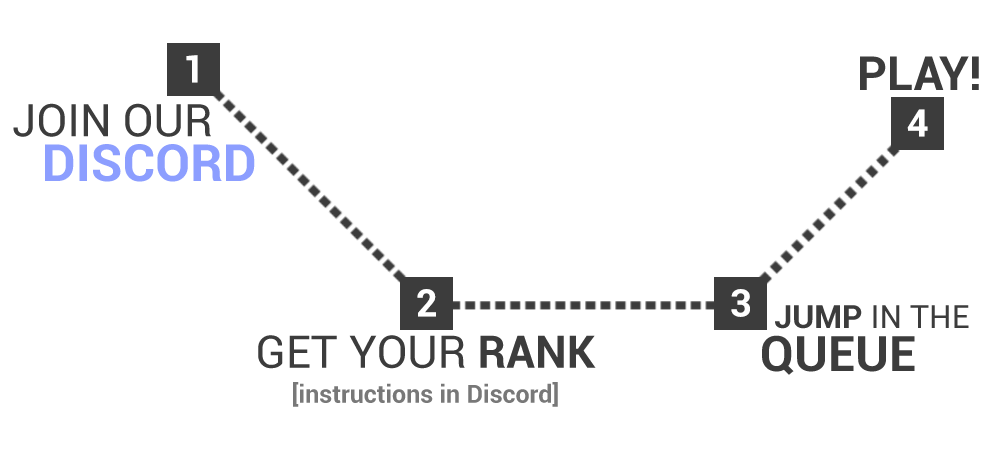
<style>
.page{position:relative;width:1000px;height:450px;background:#ffffff}
.page>*{position:absolute;margin:0}
.t1{font:38px "Roboto-Bold";color:#ffffff}
.t2{font:47px "Roboto-Bold";color:#3c3c3c}
.t3{font:45px "Roboto-Regular";color:#3c3c3c}
.t4{font:51.2px "Roboto-Bold";color:#8c9eff}
.t5{font:32px "Roboto-Regular";color:#3c3c3c}
.t6{font:32px "Roboto-Bold";color:#3c3c3c}
.t7{font:25px "Roboto-Bold";color:#787878}
.t8{font:45px "Roboto-Bold";color:#3c3c3c}
.t9{font:49px "Roboto-Bold";color:#3c3c3c}
</style>
<div class="page">
<p class="t1" style="left:186px;top:55px;width:12px;height:28px">1</p>
<p class="t2" style="left:860px;top:56px;width:119px;height:34px">PLAY!</p>
<p class="t3" style="left:13px;top:103px;width:198px;height:34px">JOIN OUR</p>
<p class="t1" style="left:907px;top:109px;width:21px;height:28px">4</p>
<p class="t4" style="left:45px;top:144px;width:210px;height:38px">DISCORD</p>
<p class="t1" style="left:417px;top:289px;width:19px;height:28px">2</p>
<p class="t1" style="left:731px;top:289px;width:19px;height:28px">3</p>
<p class="t5" style="left:775px;top:305px;width:194px;height:24px"><span class="t6">JUMP </span>IN THE</p>
<p class="t7" style="left:258px;top:335px;width:338px;height:72px;text-align:center"><span class="t3">GET YOUR </span><span class="t8">RANK<br></span>[instructions in Discord]</p>
<p class="t9" style="left:762px;top:335px;width:153px;height:40px">QUEUE</p>
</div>
